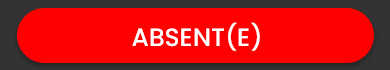
<style>
.page{position:relative;width:390px;height:70px;background:#ff0000}
.page>*{position:absolute;margin:0}
.t1{font:25px "Poppins-Medium";color:#ffffff}
</style>
<div class="page">
<p class="t1" style="left:132px;top:22px;width:128px;height:29px">ABSENT(E)</p>
</div>
